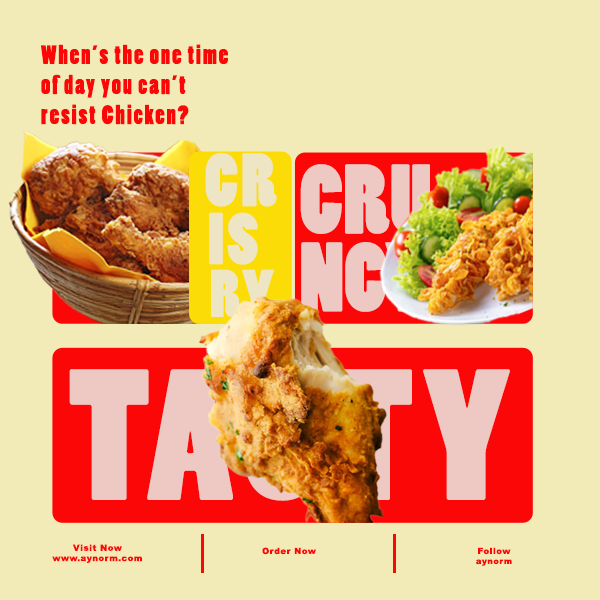
<style>
.page{position:relative;width:600px;height:600px;background:#f3ebb7}
.page>*{position:absolute;margin:0}
.t1{font:25px "PoplarStd";letter-spacing:0.075em;color:#fc0707}
.t2{font:70.5px "PoplarStd";letter-spacing:0.05em;color:#eee5c4}
.t3{font:92.1px "PoplarStd";color:#eec9c4}
.t4{font:68.3px "PoplarStd";letter-spacing:0.05em;color:#eee5c4}
.t5{font:62.9px "PoplarStd";letter-spacing:0.05em;color:#eee5c4}
.t6{font:174.1px "PoplarStd";letter-spacing:0.05em}
.t7{font:8.6px "Arial-Black";letter-spacing:0.05em;color:#fc0707}
.t8{font:8.3px "Arial-Black";letter-spacing:0.05em;color:#fc0707}
</style>
<div class="page">
<p class="t1" style="left:41px;top:44px;width:187px;height:81px">When’s the one time<br>of day you can’t<br>resist Chicken?</p>
<p class="t2" style="left:205px;top:153px;width:72px;height:54px">CR</p>
<p class="t3" style="left:300px;top:164px;width:130px;height:70px">CRU</p>
<p class="t4" style="left:209px;top:212px;width:49px;height:53px">IS</p>
<p class="t3" style="left:301px;top:242px;width:131px;height:70px">NCY</p>
<p class="t5" style="left:211px;top:269px;width:63px;height:49px">RY</p>
<p class="t6" style="left:69px;top:369px;width:441px;height:132px">TASTY</p>
<p class="t7" style="left:52px;top:544px;width:90px;height:19px;text-align:center">Visit Now<br>www.aynorm.com</p>
<p class="t7" style="left:262px;top:547px;width:54px;height:8px">Order Now</p>
<p class="t7" style="left:476px;top:547px;width:36px;height:19px;text-align:center">Follow<br><span class="t8">aynorm</span></p>
</div>
